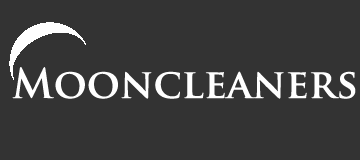
<style>
.page{position:relative;width:360px;height:160px;background:#333333}
.page>*{position:absolute;margin:0}
.t1{font:40px "TrajanPro-Bold";color:#ffffff}
</style>
<div class="page">
<p class="t1" style="left:12px;top:67px;width:344px;height:32px">Mooncleaners</p>
</div>
